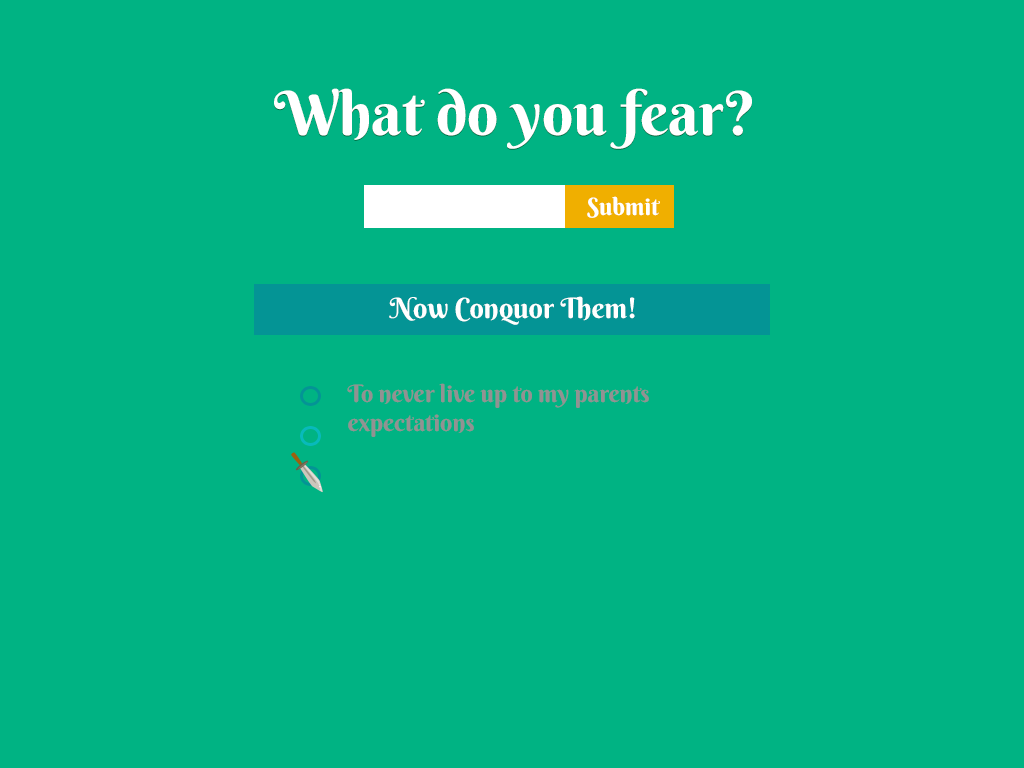
<style>
.page{position:relative;width:1024px;height:768px;background:#00b383}
.page>*{position:absolute;margin:0}
.t1{font:61.1px "BerkshireSwash-Regular";color:#ffffff}
.t2{font:24px "BerkshireSwash-Regular";color:#ffffff}
.t3{font:28px "BerkshireSwash-Regular";color:#ffffff}
.t4{font:24px "BerkshireSwash-Regular";color:#929292}
</style>
<div class="page">
<p class="t1" style="left:274px;top:88px;width:478px;height:61px">What do you fear?</p>
<p class="t2" style="left:587px;top:196px;width:73px;height:22px">Submit</p>
<p class="t3" style="left:389px;top:296px;width:246px;height:29px">Now Conquor Them!</p>
<p class="t4" style="left:347px;top:383px;width:302px;height:54px">To never live up to my parents <br>expectations</p>
</div>
